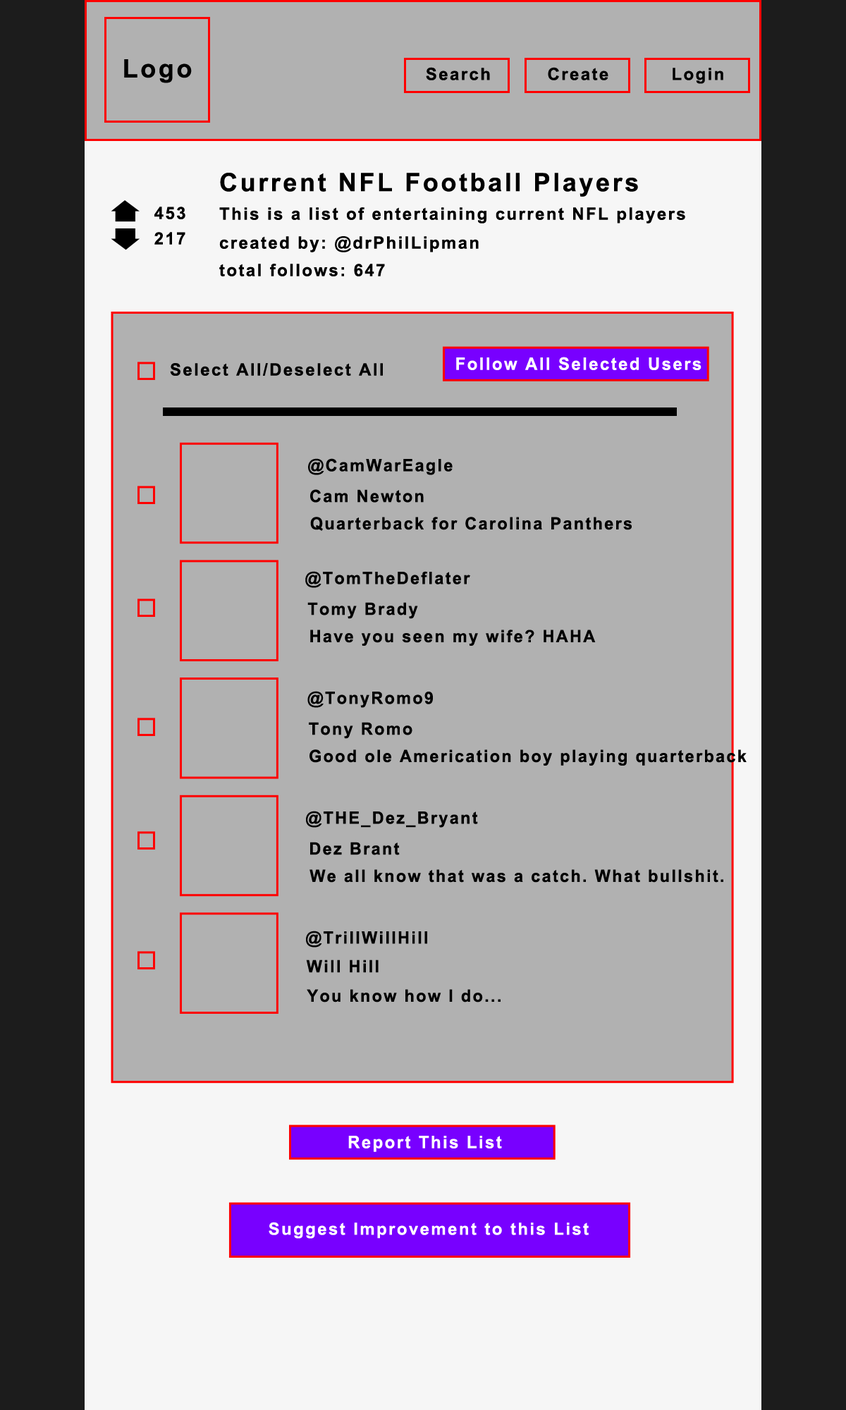
<style>
.page{position:relative;width:846px;height:1410px;background:#b1b1b1}
.page>*{position:absolute;margin:0}
.t1{font:25.4px "Arial-BoldMT";letter-spacing:0.1em;color:#000000}
.t2{font:16.9px "Arial-BoldMT";letter-spacing:0.1em;color:#000000}
.t3{font:17.3px "Arial-BoldMT";letter-spacing:0.1em;color:#ffffff}
.t4{font:16.9px "Arial-BoldMT";letter-spacing:0.1em;color:#ffffff}
</style>
<div class="page">
<p class="t1" style="left:124px;top:59px;width:68px;height:24px">Logo</p>
<p class="t2" style="left:426px;top:67px;width:64px;height:13px">Search</p>
<p class="t2" style="left:548px;top:67px;width:60px;height:13px">Create</p>
<p class="t2" style="left:672px;top:68px;width:51px;height:16px">Login</p>
<p class="t1" style="left:220px;top:173px;width:418px;height:24px">Current NFL Football Players</p>
<p class="t2" style="left:154px;top:207px;width:31px;height:12px">453</p>
<p class="t2" style="left:219px;top:207px;width:466px;height:16px">This is a list of entertaining current NFL players</p>
<p class="t2" style="left:154px;top:232px;width:31px;height:13px">217</p>
<p class="t2" style="left:219px;top:236px;width:260px;height:16px">created by: @drPhilLipman</p>
<p class="t2" style="left:219px;top:264px;width:166px;height:12px">total follows: 647</p>
<p class="t2" style="left:170px;top:363px;width:213px;height:13px">Select All/Deselect All</p>
<p class="t3" style="left:456px;top:357px;width:245px;height:13px">Follow All Selected Users</p>
<p class="t2" style="left:308px;top:458px;width:145px;height:17px">@CamWarEagle</p>
<p class="t2" style="left:310px;top:489px;width:114px;height:14px">Cam Newton</p>
<p class="t2" style="left:310px;top:517px;width:322px;height:14px">Quarterback for Carolina Panthers</p>
<p class="t2" style="left:305px;top:571px;width:165px;height:17px">@TomTheDeflater</p>
<p class="t2" style="left:307px;top:602px;width:111px;height:17px">Tomy Brady</p>
<p class="t2" style="left:310px;top:629px;width:286px;height:17px">Have you seen my wife? HAHA</p>
<p class="t2" style="left:307px;top:691px;width:126px;height:17px">@TonyRomo9</p>
<p class="t2" style="left:309px;top:722px;width:103px;height:17px">Tony Romo</p>
<p class="t2" style="left:309px;top:749px;width:437px;height:16px">Good ole Americation boy playing quarterback</p>
<p class="t2" style="left:306px;top:811px;width:172px;height:17px">@THE_Dez_Bryant</p>
<p class="t2" style="left:310px;top:842px;width:90px;height:13px">Dez Brant</p>
<p class="t2" style="left:309px;top:869px;width:414px;height:14px">We all know that was a catch. What bullshit.</p>
<p class="t2" style="left:306px;top:930px;width:121px;height:17px">@TrillWillHill</p>
<p class="t2" style="left:306px;top:959px;width:73px;height:14px">Will Hill</p>
<p class="t2" style="left:307px;top:989px;width:193px;height:13px">You know how I do...</p>
<p class="t3" style="left:348px;top:1136px;width:154px;height:16px">Report This List</p>
<p class="t4" style="left:269px;top:1222px;width:320px;height:16px">Suggest Improvement to this List</p>
</div>
